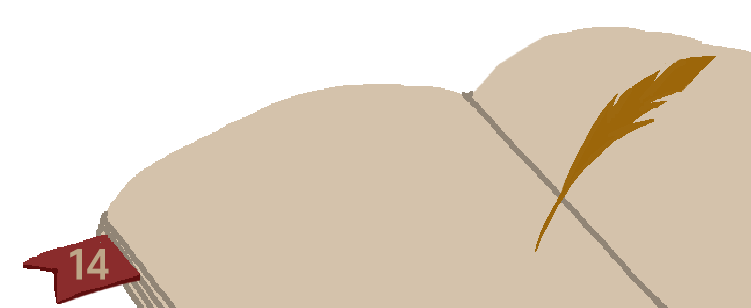
<style>
.page{position:relative;width:751px;height:308px;background:#d4c2ab}
.page>*{position:absolute;margin:0}
.t1{font:42.3px "DOUYINSANSBOLD-GB";color:#bda688;text-transform:uppercase}
</style>
<div class="page">
<p class="t1" style="left:70px;top:249px;width:39px;height:31px">14</p>
</div>
